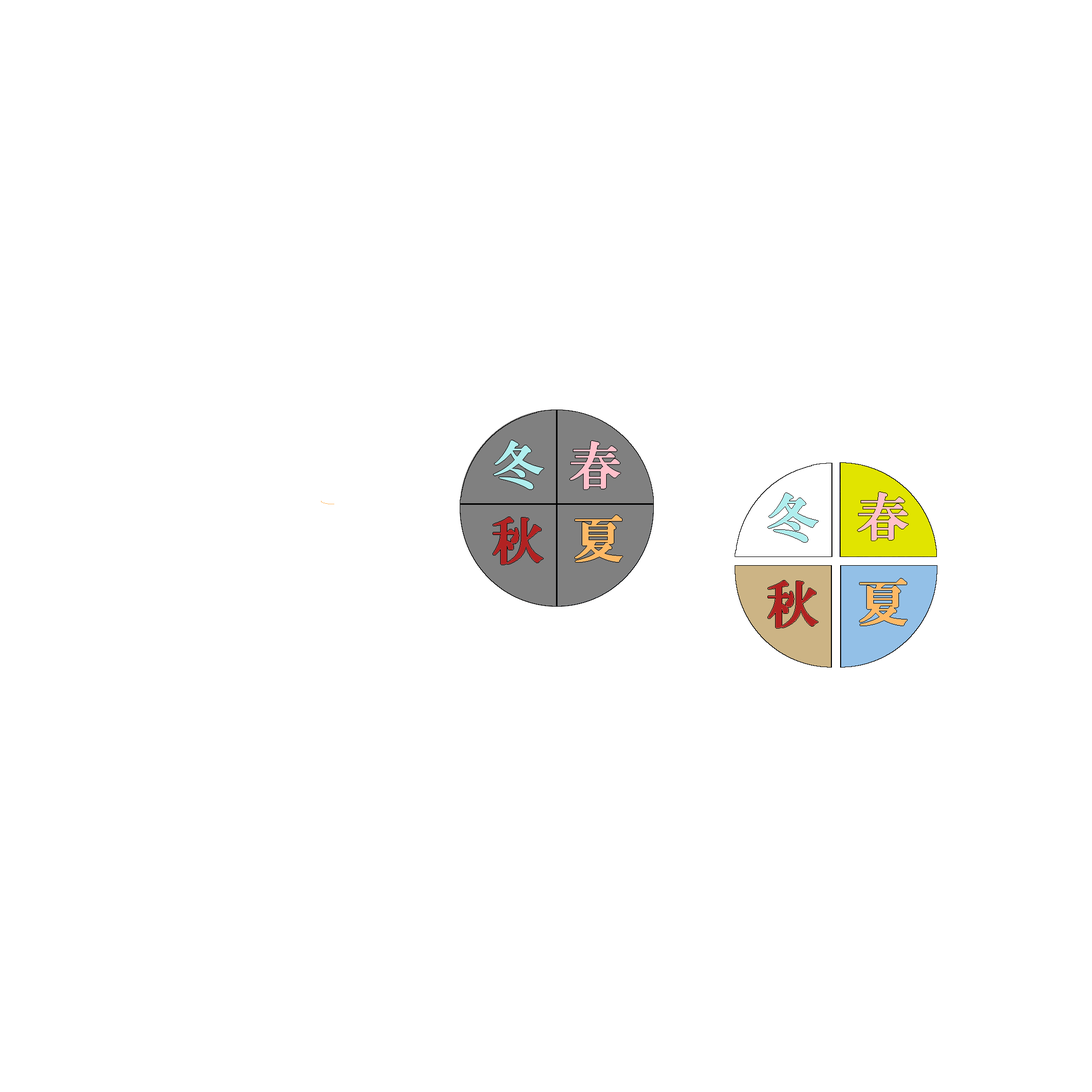
<style>
.page{position:relative;width:1092px;height:1092px;background:#ffffff}
.page>*{position:absolute;margin:0}
.t1{font:51.2px "HGSMinchoB";color:#afeeee;font-weight:bold}
.t2{font:51.2px "HGSMinchoB";color:#ffc0cb;font-weight:bold}
.t3{font:51.2px "HGSMinchoB";color:#b22222;font-weight:bold}
.t4{font:51.2px "HGSMinchoB";color:#feb965;font-weight:bold}
</style>
<div class="page">
<p class="t1" style="left:494px;top:440px;width:50px;height:49px">冬</p>
<p class="t2" style="left:570px;top:441px;width:50px;height:48px">春</p>
<p class="t1" style="left:768px;top:493px;width:50px;height:49px">冬</p>
<p class="t2" style="left:858px;top:492px;width:50px;height:49px">春</p>
<p class="t3" style="left:493px;top:517px;width:50px;height:48px">秋</p>
<p class="t4" style="left:575px;top:515px;width:48px;height:47px">夏</p>
<p class="t3" style="left:768px;top:581px;width:50px;height:47px">秋</p>
<p class="t4" style="left:860px;top:579px;width:47px;height:47px">夏</p>
</div>
